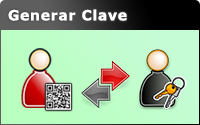
<style>
.page{position:relative;width:200px;height:125px}
.page>*{position:absolute;margin:0}
.t1{font:14px "Verdana-Bold";letter-spacing:0.05em;color:#ffffff}
</style>
<div class="page">
<p class="t1" style="left:8px;top:9px;width:119px;height:12px">Generar Clave</p>
</div>
